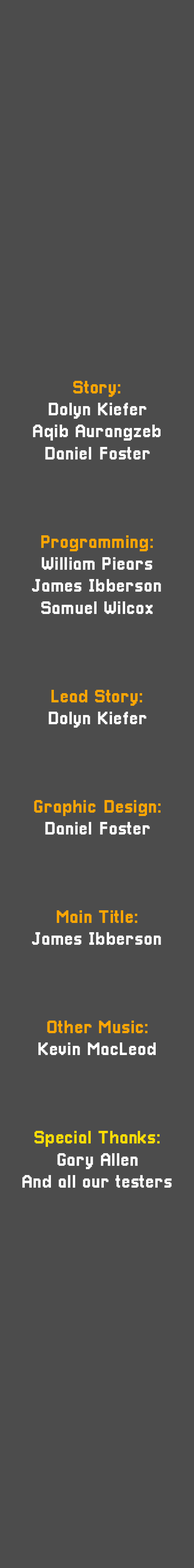
<style>
.page{position:relative;width:194px;height:1568px;background:#4c4c4c}
.page>*{position:absolute;margin:0}
.t1{font:18.4px "Pixellari";color:#ffffff}
.t2{font:18.4px "Pixellari";color:#ffa600}
.t3{font:18.4px "Pixellari";color:#ffde03}
</style>
<div class="page">
<p class="t1" style="left:22px;top:381px;width:150px;height:807px;text-align:center"><span class="t2">Story:<br></span>Dolyn Kiefer<br>Aqib Aurangzeb<br>Daniel Foster<br><br><br><br><span class="t2">Programming:<br></span>William Piears<br>James Ibberson<br>Samuel Wilcox<br><br><br><br><span class="t2">Lead Story:<br></span>Dolyn Kiefer<br><br><br><br><span class="t2">Graphic Design:<br></span>Daniel Foster<br><br><br><br><span class="t2">Main Title:<br></span>James Ibberson<br><br><br><br><span class="t2">Other Music:<br></span>Kevin MacLeod<br><br><br><br><span class="t3">Special Thanks:<br></span>Gary Allen<br>And all our testers</p>
</div>
